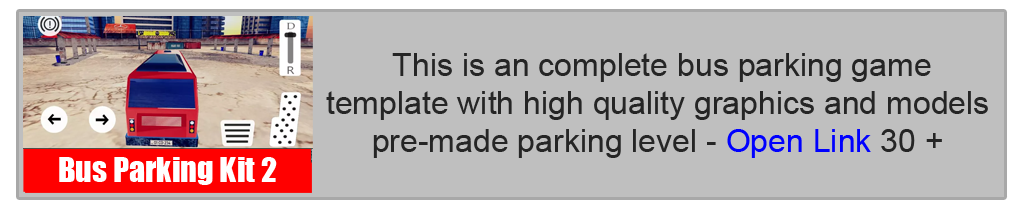
<style>
.page{position:relative;width:1024px;height:210px;background:#bfbfbf}
.page>*{position:absolute;margin:0}
.t1{font:32px "ArialMT";color:#252525}
.t2{font:32px "ArialMT";color:#0000ff}
.t3{font:32px "Impact";color:#ffffff}
</style>
<div class="page">
<p class="t1" style="left:326px;top:53px;width:662px;height:105px;text-align:center">This is an complete bus parking game <br>template with high quality graphics and models<br>+ 30 pre-made parking level - <span class="t2">Open Link</span></p>
<p class="t3" style="left:59px;top:157px;width:218px;height:28px">Bus Parking Kit 2</p>
</div>
